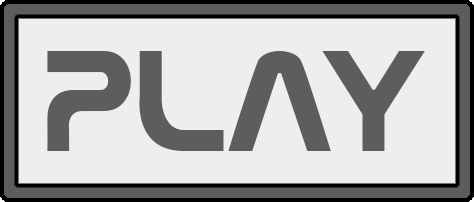
<style>
.page{position:relative;width:474px;height:202px;background:#eeeeee}
.page>*{position:absolute;margin:0}
.t1{font:150px "Nasalization";color:#5d5d5d}
</style>
<div class="page">
<p class="t1" style="left:47px;top:51px;width:378px;height:100px">Play</p>
</div>
